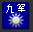
<style>
.page{position:relative;width:33px;height:32px;background:#000090}
.page>*{position:absolute;margin:0}
.t1{font:10.4px "SimSun";color:#ffffff}
</style>
<div class="page">
<p class="t1" style="left:6px;top:4px;width:19px;height:9px">九军</p>
</div>
